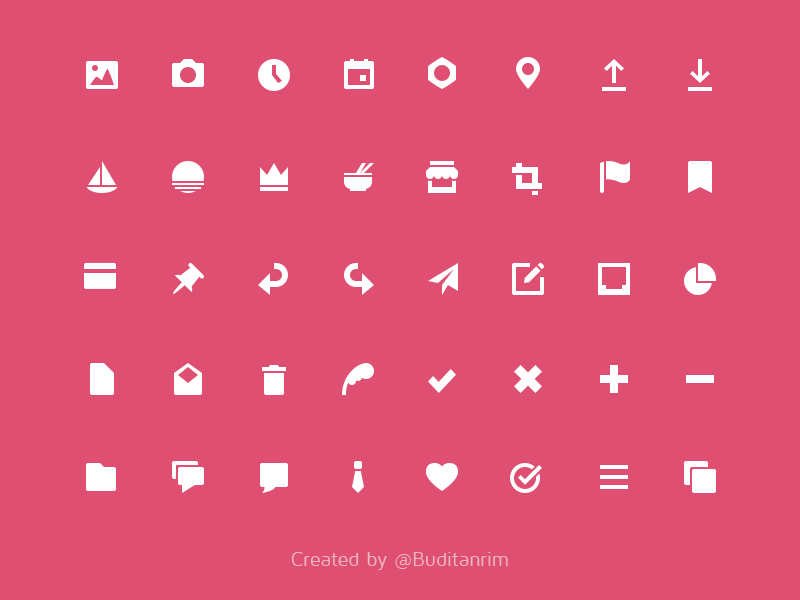
<style>
.page{position:relative;width:800px;height:600px;background:#df4f71}
.page>*{position:absolute;margin:0}
.t1{font:20px "MavenProRegular";color:#efb5c1}
</style>
<div class="page">
<p class="t1" style="left:291px;top:552px;width:217px;height:18px">Created by @Buditanrim</p>
</div>
